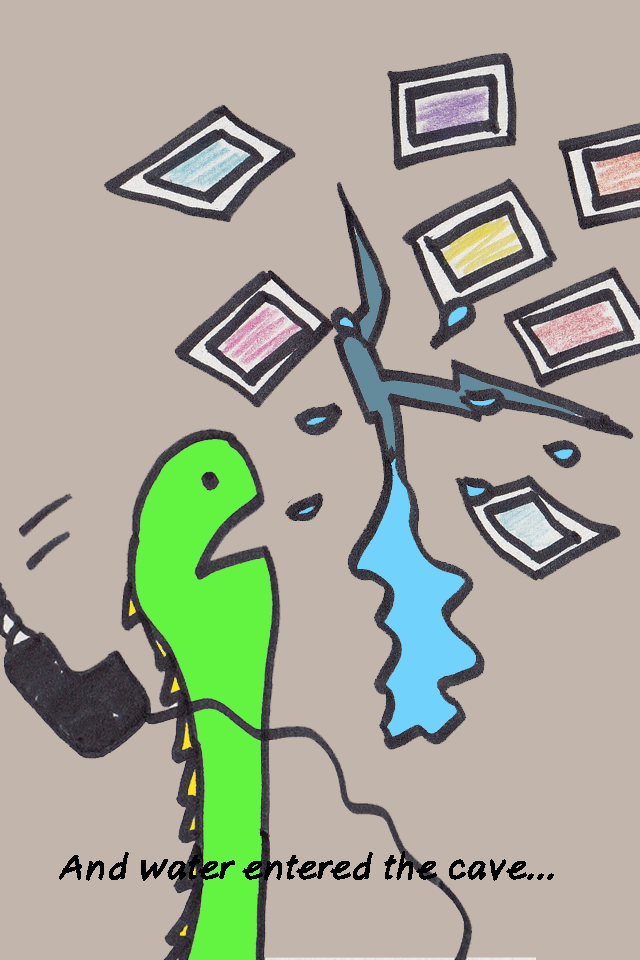
<style>
.page{position:relative;width:640px;height:960px;background:#c1b5ac}
.page>*{position:absolute;margin:0}
.t1{font:36px "AxureHandwriting-BoldItalic";color:#000000}
</style>
<div class="page">
<p class="t1" style="left:59px;top:851px;width:495px;height:30px">And water entered the cave...</p>
</div>
